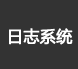
<style>
.page{position:relative;width:78px;height:69px;background:#333333}
.page>*{position:absolute;margin:0}
.t1{font:16px "MicrosoftYaHei";color:#ffffff;font-weight:bold}
</style>
<div class="page">
<p class="t1" style="left:9px;top:28px;width:64px;height:17px">日志系统</p>
</div>
